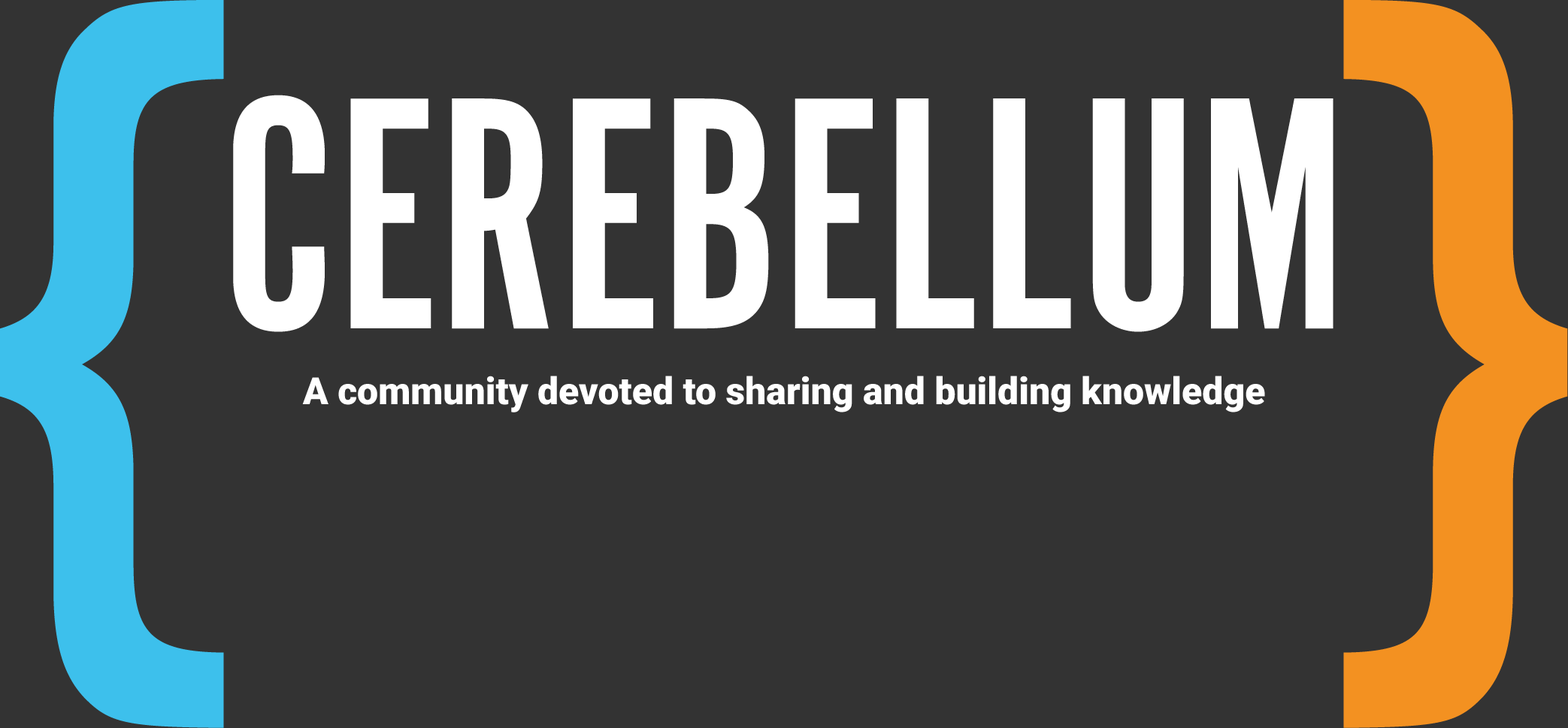
<style>
.page{position:relative;width:1568px;height:728px;background:#333333}
.page>*{position:absolute;margin:0}
.t1{font:939.6px "AlternateGotNo1D";color:#3dc0ec}
.t2{font:939.6px "AlternateGotNo1D";color:#f39121}
.t3{font:344.5px "AlternateGotNo1D";color:#ffffff}
.t4{font:37.6px "Roboto-Black";color:#ffffff}
</style>
<div class="page">
<p class="t1" style="left:0px;top:0px;width:224px;height:728px">{</p>
<p class="t2" style="left:1343px;top:0px;width:225px;height:728px">}}}</p>
<p class="t3" style="left:233px;top:95px;width:1100px;height:237px">CEREBELLUM</p>
<p class="t4" style="left:302px;top:376px;width:963px;height:37px">A community devoted to sharing and building knowledge</p>
</div>
